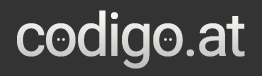
<style>
.page{position:relative;width:262px;height:76px;background:#333333}
.page>*{position:absolute;margin:0}
.t1{font:60px "Roboto-Regular";letter-spacing:-0.065em;color:#dcdcdc;font-weight:bold}
</style>
<div class="page">
<p class="t1" style="left:17px;top:10px;width:228px;height:59px">codigo.at</p>
</div>
